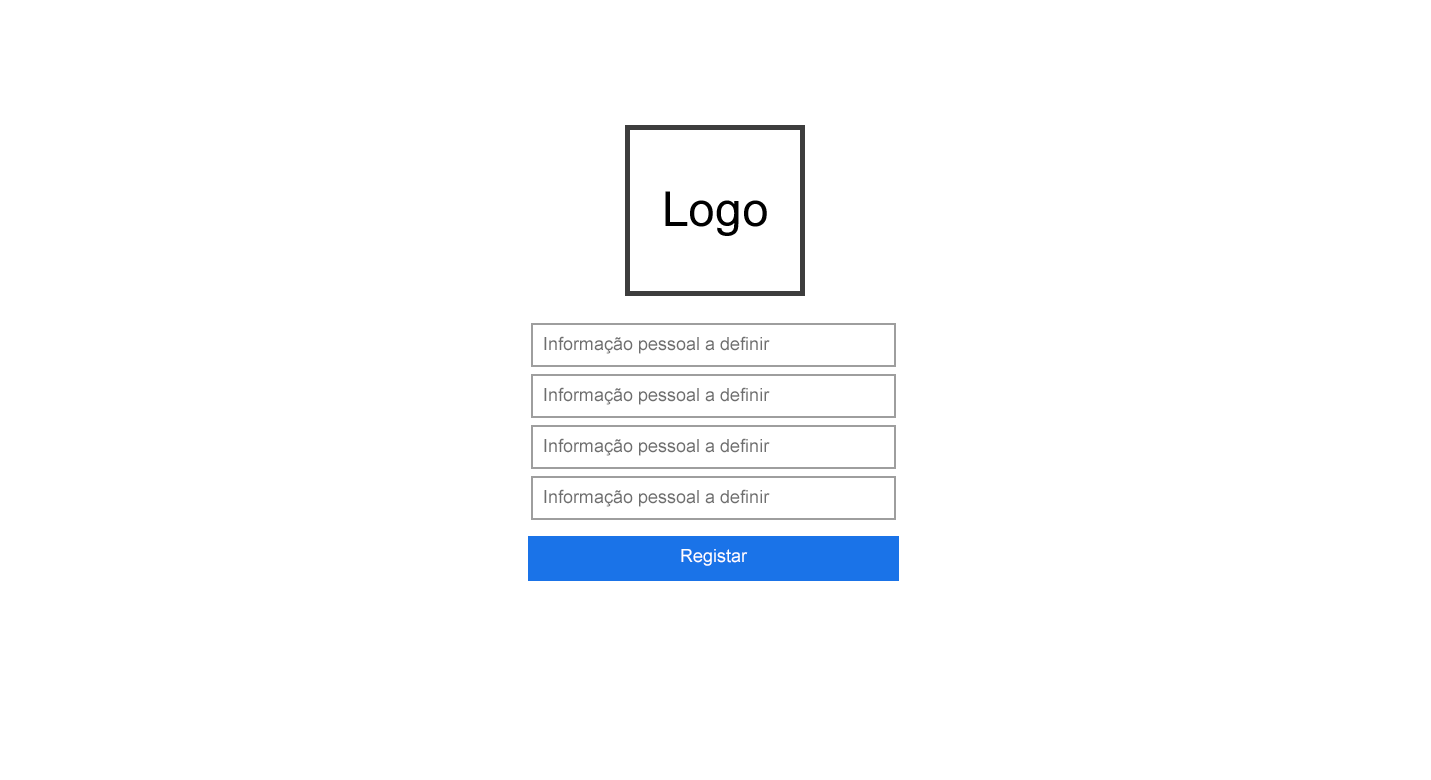
<style>
.page{position:relative;width:1431px;height:780px;background:#ffffff}
.page>*{position:absolute;margin:0}
.t1{font:18px "ArialMT";color:#6e6e6e}
.t2{font:18px "ArialMT";color:#ffffff}
</style>
<div class="page">
<p class="t1" style="left:544px;top:336px;width:226px;height:18px">Informação pessoal a definir</p>
<p class="t1" style="left:544px;top:387px;width:226px;height:18px">Informação pessoal a definir</p>
<p class="t1" style="left:544px;top:438px;width:226px;height:18px">Informação pessoal a definir</p>
<p class="t1" style="left:544px;top:489px;width:226px;height:18px">Informação pessoal a definir</p>
<p class="t2" style="left:681px;top:549px;width:67px;height:17px">Registar</p>
</div>
